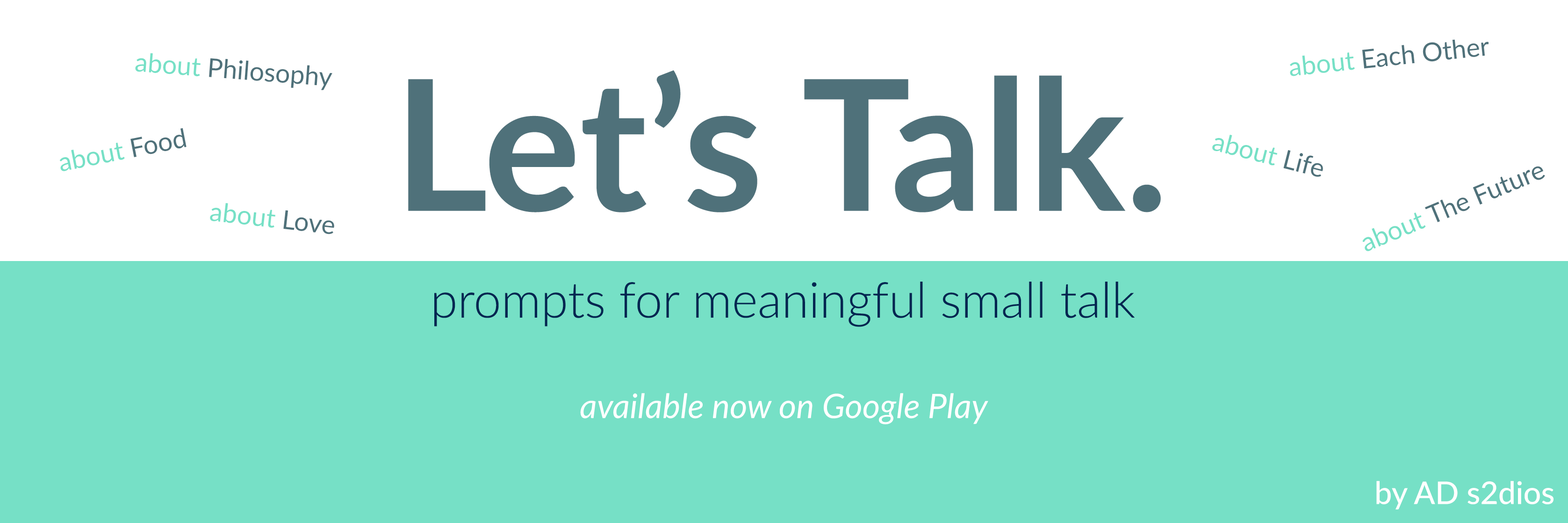
<style>
.page{position:relative;width:1568px;height:523px;background:#76e0c6}
.page>*{position:absolute;margin:0}
.t1{font:26px "Lato-Regular";color:#4f717a}
.t2{font:26px "Lato-Regular";color:#76e0c6}
.t3{font:181.8px "Lato-Bold";color:#4f717a}
.t4{font:49.3px "Lato-Light";color:#002651}
.t5{font:33.8px "Lato-Italic";color:#ffffff}
.t6{font:31.2px "Lato-Medium";color:#ffffff}
</style>
<div class="page">
<p class="t1" style="left:1290px;top:39px;width:199px;height:37px;rotate:-6deg"><span class="t2">about </span>Each Other</p>
<p class="t1" style="left:135px;top:53px;width:197px;height:37px;rotate:4deg"><span class="t2">about </span>Philosophy</p>
<p class="t3" style="left:408px;top:70px;width:753px;height:142px">Let’s Talk.</p>
<p class="t2" style="left:59px;top:128px;width:128px;height:43px;rotate:-11deg">about <span class="t1">Food</span></p>
<p class="t2" style="left:1212px;top:135px;width:111px;height:42px;rotate:14deg">about <span class="t1">Life</span></p>
<p class="t1" style="left:1362px;top:166px;width:183px;height:85px;rotate:-23deg"><span class="t2">about </span>The Future</p>
<p class="t2" style="left:210px;top:203px;width:124px;height:31px;rotate:6deg">about <span class="t1">Love</span></p>
<p class="t4" style="left:434px;top:281px;width:701px;height:46px">prompts for meaningful small talk</p>
<p class="t5" style="left:580px;top:393px;width:408px;height:31px">available now on Google Play</p>
<p class="t6" style="left:1376px;top:481px;width:178px;height:28px">by AD s2dios</p>
</div>
